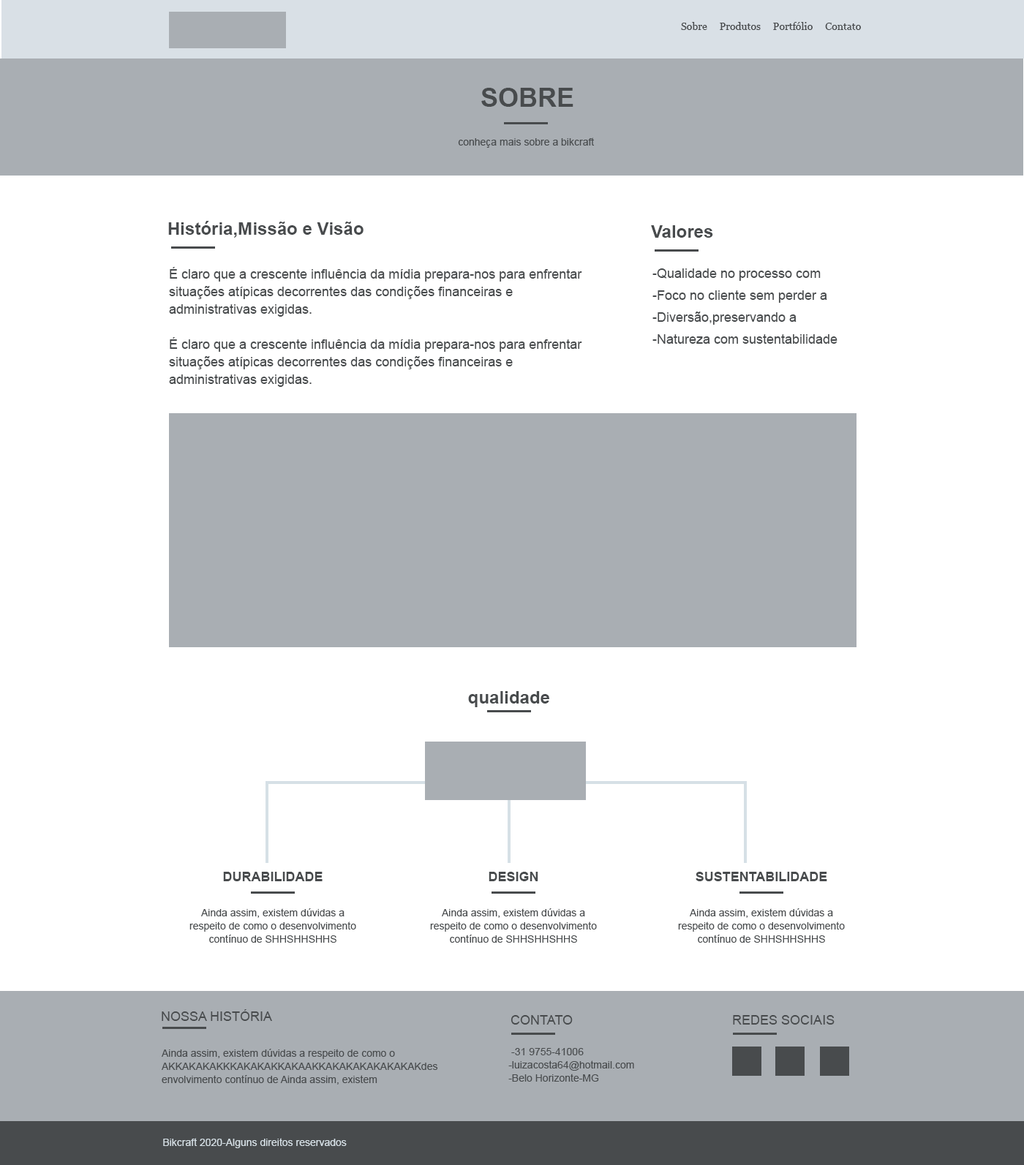
<style>
.page{position:relative;width:1024px;height:1165px;background:#ffffff}
.page>*{position:absolute;margin:0}
.t1{font:10.2px "Georgia";color:#484b4d}
.t2{font:26.3px "Arial-BoldMT";color:#484b4d;text-transform:uppercase}
.t3{font:10.2px "ArialMT";color:#484b4d}
.t4{font:17.5px "Arial-BoldMT";color:#484b4d}
.t5{font:13.2px/17.5px "ArialMT";color:#484b4d}
.t6{font:13.2px/21.9px "ArialMT";color:#484b4d}
.t7{font:13.2px "Arial-BoldMT";color:#484b4d}
.t8{font:10.2px/13.2px "ArialMT";color:#484b4d}
.t9{font:13.2px "ArialMT";color:#484b4d}
.t10{font:10.2px "ArialMT";color:#d6e0e6}
</style>
<div class="page">
<p class="t1" style="left:681px;top:22px;width:180px;height:8px">Sobre     Produtos     Portfólio     Contato</p>
<p class="t2" style="left:481px;top:88px;width:92px;height:19px">SOBRE</p>
<p class="t3" style="left:458px;top:137px;width:136px;height:11px">conheça mais sobre a bikcraft</p>
<p class="t4" style="left:168px;top:221px;width:195px;height:17px">História,Missão e Visão</p>
<p class="t4" style="left:651px;top:225px;width:62px;height:13px">Valores</p>
<p class="t5" style="left:169px;top:267px;width:413px;height:120px">É claro que a crescente influência da mídia prepara-nos para enfrentar situações atípicas decorrentes das condições financeiras e administrativas exigidas.<br><br>É claro que a crescente influência da mídia prepara-nos para enfrentar situações atípicas decorrentes das condições financeiras e administrativas exigidas.</p>
<p class="t6" style="left:652px;top:268px;width:185px;height:76px">-Qualidade no processo com<br>-Foco no cliente sem perder a <br>-Diversão,preservando a <br>-Natureza com sustentabilidade</p>
<p class="t4" style="left:468px;top:691px;width:81px;height:16px">qualidade</p>
<p class="t7" style="left:223px;top:872px;width:99px;height:9px">DURABILIDADE</p>
<p class="t7" style="left:488px;top:872px;width:50px;height:9px">DESIGN</p>
<p class="t7" style="left:695px;top:872px;width:132px;height:9px">SUSTENTABILIDADE</p>
<p class="t8" style="left:189px;top:908px;width:167px;height:35px;text-align:center">Ainda assim, existem dúvidas a respeito de como o desenvolvimento contínuo de SHHSHHSHHS</p>
<p class="t8" style="left:430px;top:908px;width:167px;height:35px;text-align:center">Ainda assim, existem dúvidas a respeito de como o desenvolvimento contínuo de SHHSHHSHHS</p>
<p class="t8" style="left:678px;top:908px;width:167px;height:35px;text-align:center">Ainda assim, existem dúvidas a respeito de como o desenvolvimento contínuo de SHHSHHSHHS</p>
<p class="t9" style="left:162px;top:1009px;width:110px;height:12px">NOSSA HISTÓRIA</p>
<p class="t9" style="left:510px;top:1015px;width:63px;height:9px">CONTATO</p>
<p class="t9" style="left:733px;top:1015px;width:101px;height:9px">REDES SOCIAIS</p>
<p class="t8" style="left:162px;top:1049px;width:276px;height:35px">Ainda assim, existem dúvidas a respeito de como o  AKKAKAKAKKKAKAKAKKAKAAKKAKAKAKAKAKAKAKdesenvolvimento contínuo de Ainda assim, existem</p>
<p class="t8" style="left:508px;top:1048px;width:126px;height:33px">-31 9755-41006<br>-luizacosta64@hotmail.com<br>-Belo Horizonte-MG</p>
<p class="t10" style="left:163px;top:1138px;width:184px;height:10px">Bikcraft 2020-Alguns direitos reservados</p>
</div>
